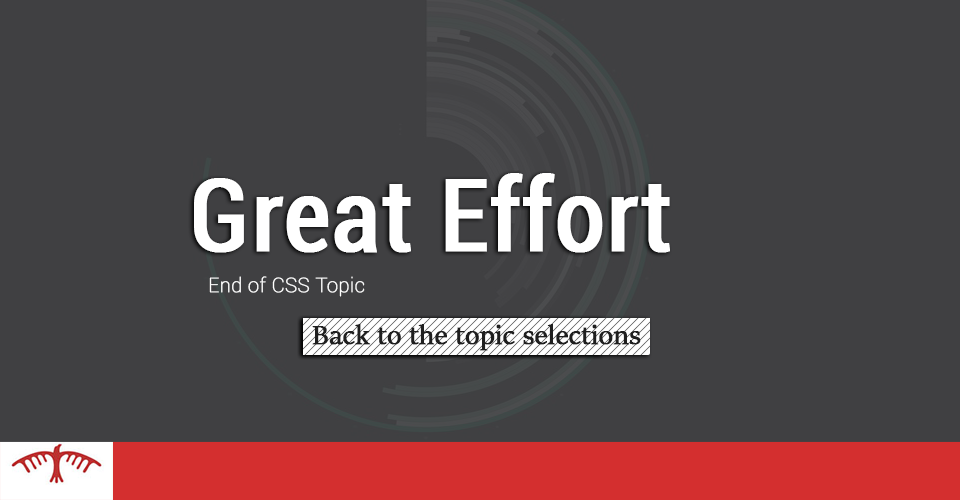
<style>
.page{position:relative;width:960px;height:500px;background:#404042}
.page>*{position:absolute;margin:0}
.t1{font:100px "Roboto-Condensed";color:#ffffff;font-weight:bold}
.t2{font:20px "Roboto-Thin";color:#ffffff;font-weight:bold}
.t3{font:30px "SitkaBanner";color:#1f1f1f;font-weight:bold}
</style>
<div class="page">
<p class="t1" style="left:194px;top:173px;width:476px;height:80px">Great Effort</p>
<p class="t2" style="left:209px;top:276px;width:156px;height:21px">End of CSS Topic</p>
<p class="t3" style="left:312px;top:324px;width:329px;height:27px">Back to the topic selections</p>
</div>
